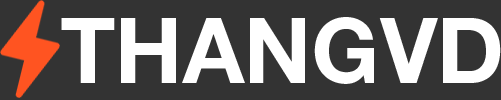
<style>
.page{position:relative;width:501px;height:100px;background:#333333}
.page>*{position:absolute;margin:0}
.t1{font:90.4px "HelveticaNeue-Bold";color:#ffffff}
</style>
<div class="page">
<p class="t1" style="left:61px;top:17px;width:440px;height:67px">THANGVD</p>
</div>
